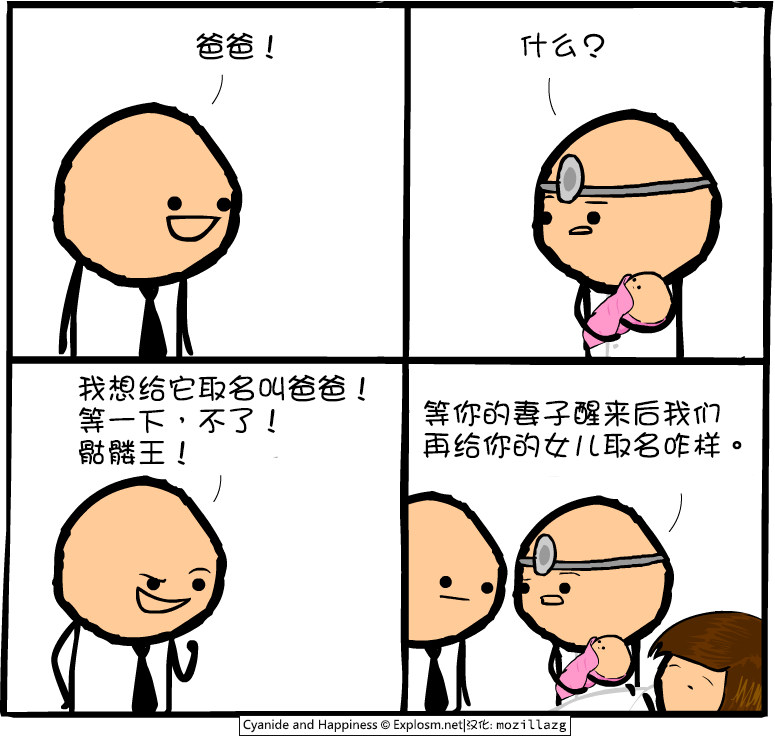
<style>
.page{position:relative;width:775px;height:740px;background:#ffffff}
.page>*{position:absolute;margin:0}
.t1{font:30px "DFGirl";color:#000000}
.t2{font:30px/32px "DFGirl";color:#000000}
</style>
<div class="page">
<p class="t1" style="left:196px;top:32px;width:77px;height:28px">爸爸！</p>
<p class="t1" style="left:520px;top:32px;width:85px;height:26px">什么？</p>
<p class="t2" style="left:78px;top:374px;width:287px;height:91px">我想给它取名叫爸爸！<br>等一下，不了！<br>骷髅王！</p>
<p class="t2" style="left:423px;top:399px;width:319px;height:60px">等你的妻子醒来后我们<br>再给你的女儿取名咋样。</p>
</div>
